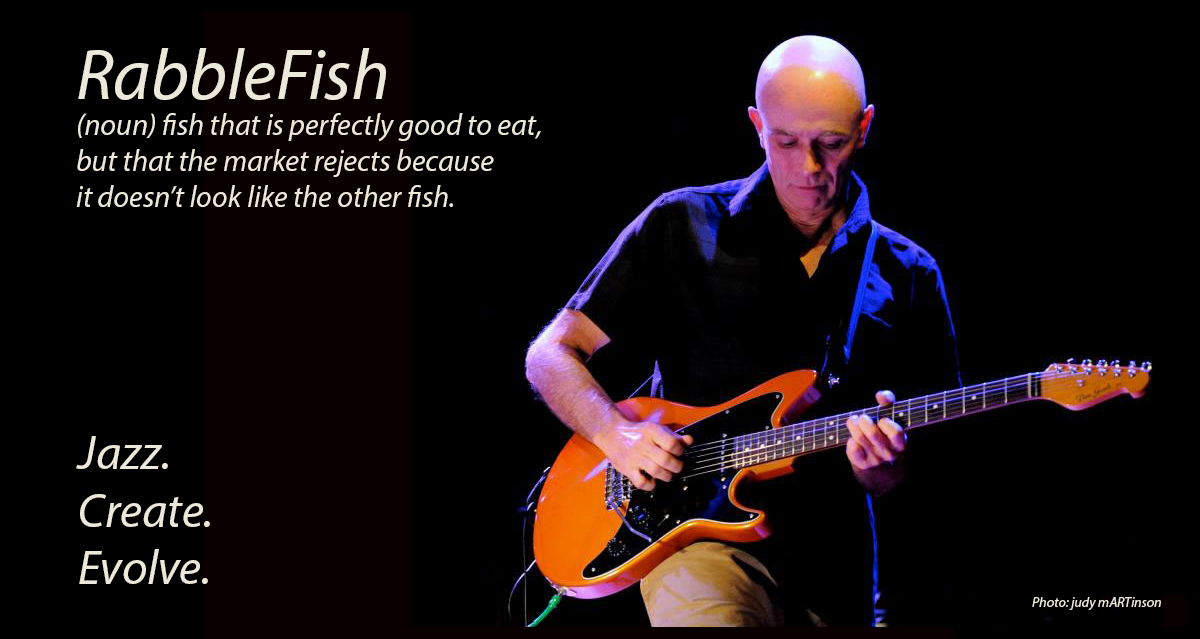
<style>
.page{position:relative;width:1200px;height:639px;background:#000000}
.page>*{position:absolute;margin:0}
.t1{font:30px "MyriadPro-It";color:#ece8da}
.t2{font:72px "MyriadPro-It";color:#ece8da}
.t3{font:48px "MyriadPro-It";color:#ece8da}
.t4{font:14px "MyriadPro-It";color:#ece8da}
</style>
<div class="page">
<p class="t1" style="left:76px;top:48px;width:465px;height:159px"><span class="t2">RabbleFish<br></span>(noun) fish that is perfectly good to eat,<br>but that the market rejects because<br>it doesn’t look like the other fish.</p>
<p class="t3" style="left:76px;top:436px;width:134px;height:148px">Jazz.<br>Create.<br>Evolve.</p>
<p class="t4" style="left:1032px;top:597px;width:129px;height:13px">Photo: judy mARTinson</p>
</div>
